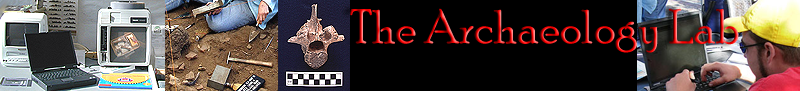
<style>
.page{position:relative;width:800px;height:91px;background:#000000}
.page>*{position:absolute;margin:0}
.t1{font:48px "PoorRichard-Regular"}
</style>
<div class="page">
<p class="t1" style="left:350px;top:8px;width:389px;height:45px">The Archaeology Lab</p>
</div>
